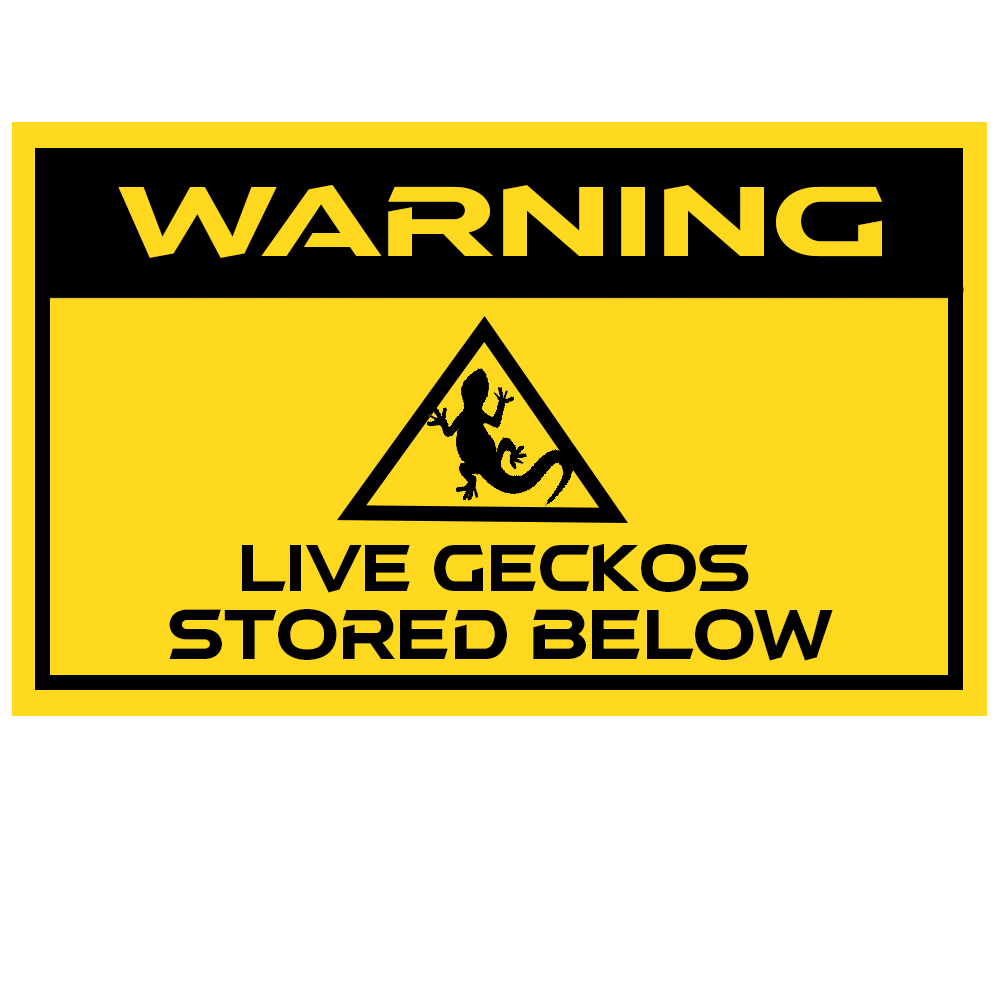
<style>
.page{position:relative;width:1000px;height:1000px;background:#ffffff}
.page>*{position:absolute;margin:0}
.t1{font:88.9px "aAtmospheric";color:#ffd920;scale:1.44 1}
.t2{font:59.7px "aAtmospheric";color:#000000}
.t3{font:63.5px "aAtmospheric";color:#000000}
</style>
<div class="page">
<p class="t1" style="left:118px;top:185px;width:764px;height:73px">Warning</p>
<p class="t2" style="left:242px;top:543px;width:507px;height:50px">LIVE GECKOS</p>
<p class="t3" style="left:169px;top:609px;width:664px;height:52px">Stored below</p>
</div>
